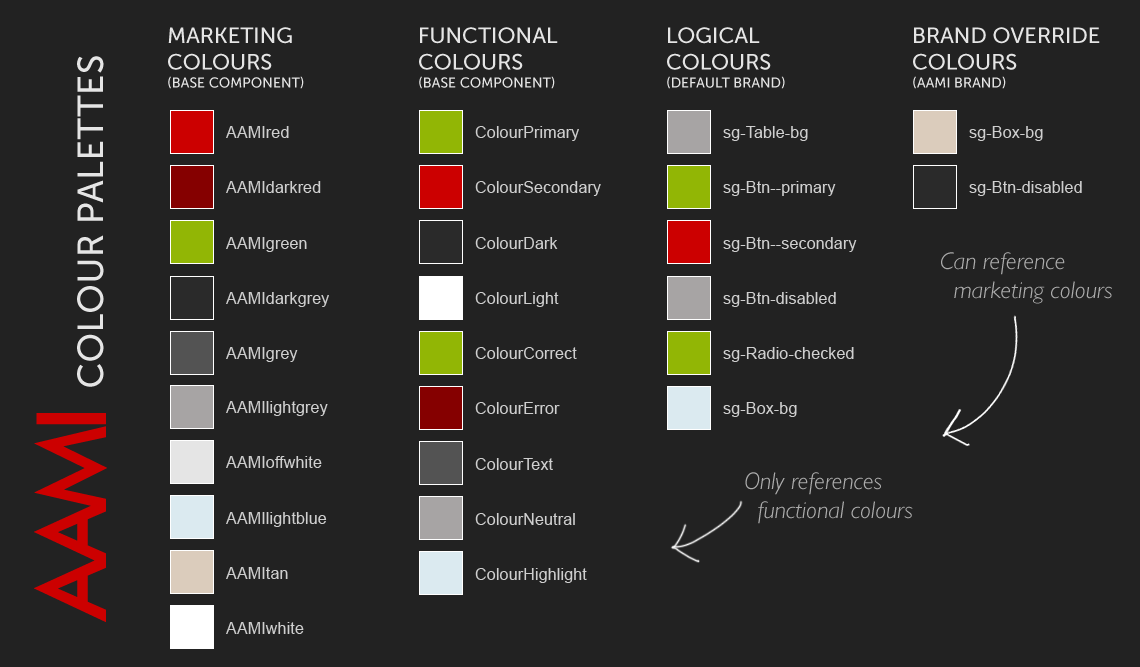
<style>
.page{position:relative;width:1140px;height:667px;background:#222222}
.page>*{position:absolute;margin:0}
.t1{font:22px "MuseoSans-500";color:#e5e5e5;text-transform:uppercase}
.t2{font:14px/18px "MuseoSans-500";color:#e5e5e5;text-transform:uppercase}
.t3{font:36px "MuseoSans-500";letter-spacing:0.01em;color:#e5e5e5;text-transform:uppercase}
.t4{font:16px "ArialMT";letter-spacing:0.01em;color:#cfcfcf}
.t5{font:24.2px "GillSans-LightItalic";color:#ababab}
</style>
<div class="page">
<p class="t1" style="left:168px;top:27px;width:136px;height:62px">Marketing<br>colours<br><span class="t2">(base component)</span></p>
<p class="t1" style="left:419px;top:27px;width:139px;height:62px">Functional<br>colours<br><span class="t2">(base component)</span></p>
<p class="t1" style="left:667px;top:27px;width:118px;height:62px">LOGICAL<br>colours<br><span class="t2">(DEFAULT BRAND)</span></p>
<p class="t1" style="left:913px;top:27px;width:187px;height:62px">BRAND OVERRIDE<br>colours<br><span class="t2">(AAMI BRAND)</span></p>
<p class="t3" style="left:77px;top:56px;width:27px;height:331px;rotate:-90deg">COLOUR PALETTES</p>
<p class="t4" style="left:226px;top:126px;width:63px;height:12px">AAMIred</p>
<p class="t4" style="left:475px;top:126px;width:104px;height:15px">ColourPrimary</p>
<p class="t4" style="left:723px;top:126px;width:85px;height:15px">sg-Table-bg</p>
<p class="t4" style="left:969px;top:126px;width:74px;height:15px">sg-Box-bg</p>
<p class="t4" style="left:226px;top:181px;width:95px;height:12px">AAMIdarkred</p>
<p class="t4" style="left:475px;top:181px;width:126px;height:15px">ColourSecondary</p>
<p class="t4" style="left:723px;top:181px;width:113px;height:15px">sg-Btn--primary</p>
<p class="t4" style="left:969px;top:181px;width:113px;height:15px">sg-Btn-disabled</p>
<p class="t4" style="left:226px;top:237px;width:81px;height:15px">AAMIgreen</p>
<p class="t4" style="left:475px;top:237px;width:83px;height:12px">ColourDark</p>
<p class="t4" style="left:723px;top:237px;width:134px;height:15px">sg-Btn--secondary</p>
<p class="t5" style="left:941px;top:252px;width:171px;height:52px">Can reference<br>  marketing colours</p>
<p class="t4" style="left:226px;top:292px;width:103px;height:15px">AAMIdarkgrey</p>
<p class="t4" style="left:475px;top:292px;width:84px;height:15px">ColourLight</p>
<p class="t4" style="left:723px;top:292px;width:113px;height:15px">sg-Btn-disabled</p>
<p class="t4" style="left:226px;top:347px;width:72px;height:15px">AAMIgrey</p>
<p class="t4" style="left:475px;top:347px;width:102px;height:12px">ColourCorrect</p>
<p class="t4" style="left:723px;top:347px;width:131px;height:15px">sg-Radio-checked</p>
<p class="t4" style="left:226px;top:401px;width:102px;height:15px">AAMIlightgrey</p>
<p class="t4" style="left:475px;top:402px;width:85px;height:12px">ColourError</p>
<p class="t4" style="left:723px;top:402px;width:74px;height:15px">sg-Box-bg</p>
<p class="t4" style="left:226px;top:456px;width:96px;height:12px">AAMIoffwhite</p>
<p class="t4" style="left:475px;top:458px;width:78px;height:12px">ColourText</p>
<p class="t5" style="left:745px;top:472px;width:168px;height:52px">Only references<br>  functional colours</p>
<p class="t4" style="left:226px;top:512px;width:101px;height:15px">AAMIlightblue</p>
<p class="t4" style="left:475px;top:513px;width:100px;height:12px">ColourNeutral</p>
<p class="t4" style="left:226px;top:567px;width:62px;height:12px">AAMItan</p>
<p class="t4" style="left:475px;top:568px;width:112px;height:15px">ColourHighlight</p>
<p class="t4" style="left:226px;top:622px;width:78px;height:12px">AAMIwhite</p>
</div>
